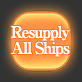
<style>
.page{position:relative;width:82px;height:82px}
.page>*{position:absolute;margin:0}
.t1{font:16px/16px "RyuminPro-ExBold";letter-spacing:-0.08em;color:#ffffff}
</style>
<div class="page">
<p class="t1" style="left:11px;top:25px;width:59px;height:32px;text-align:center">Resupply<br>All Ships</p>
</div>
